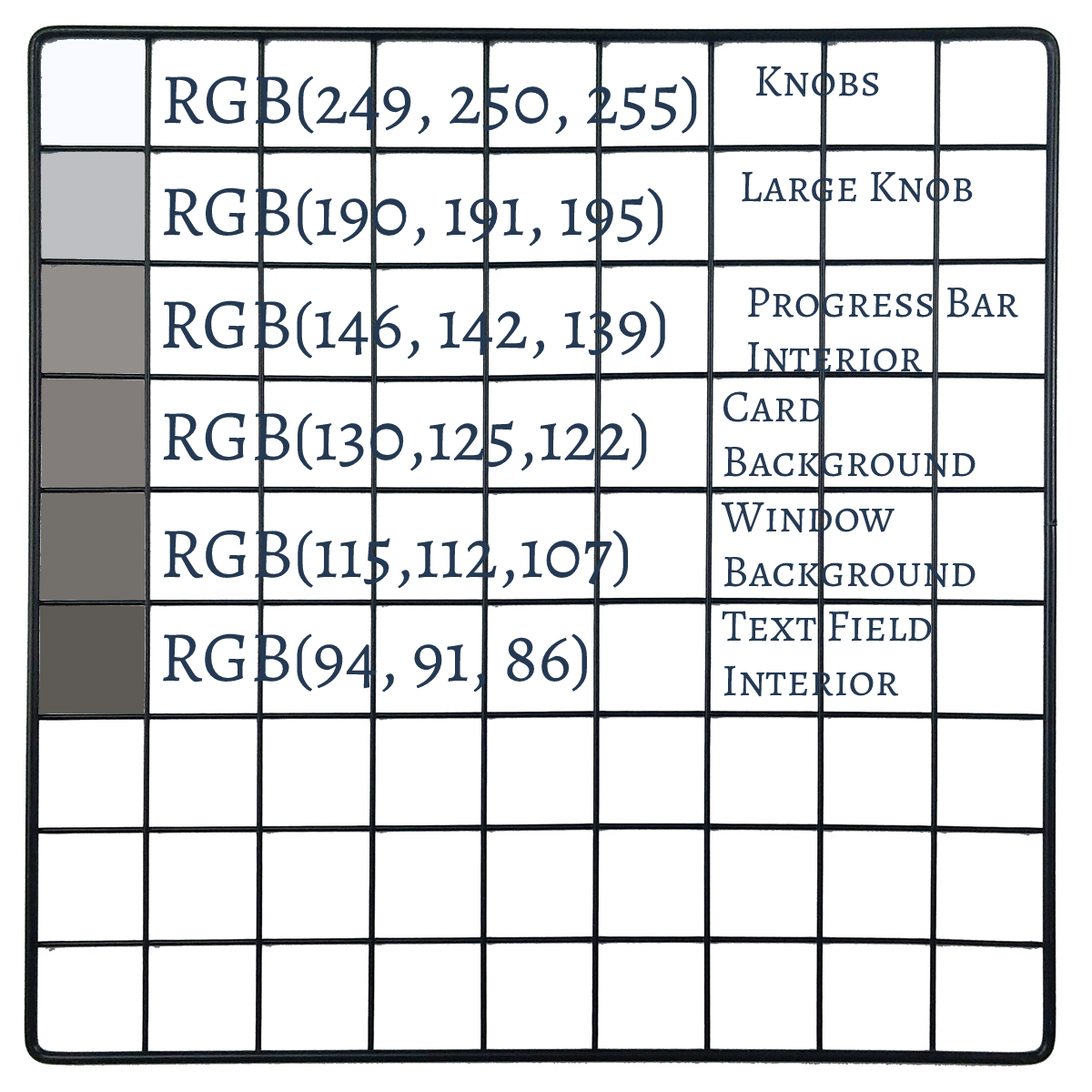
<style>
.page{position:relative;width:1092px;height:1092px;background:#ffffff}
.page>*{position:absolute;margin:0}
.t1{font:45.5px "AlegreyaSC-Regular";color:#253952}
.t2{font:71.9px "AlegreyaSC-Regular";color:#253952}
</style>
<div class="page">
<p class="t1" style="left:755px;top:66px;width:124px;height:31px">Knobs</p>
<p class="t2" style="left:164px;top:76px;width:533px;height:59px">RGB(249, 250, 255)</p>
<p class="t1" style="left:742px;top:171px;width:231px;height:32px">Large Knob</p>
<p class="t2" style="left:163px;top:187px;width:500px;height:60px">RGB(190, 191, 195)</p>
<p class="t1" style="left:747px;top:287px;width:271px;height:86px">Progress Bar<br>Interior</p>
<p class="t2" style="left:163px;top:300px;width:502px;height:59px">RGB(146, 142, 139)</p>
<p class="t1" style="left:723px;top:391px;width:253px;height:87px">Card <br>Background</p>
<p class="t2" style="left:163px;top:412px;width:484px;height:59px">RGB(130,125,122)</p>
<p class="t1" style="left:721px;top:501px;width:255px;height:87px">Window <br>Background</p>
<p class="t2" style="left:163px;top:530px;width:466px;height:59px">RGB(115,112,107)</p>
<p class="t1" style="left:722px;top:611px;width:210px;height:86px">Text Field <br>Interior</p>
<p class="t2" style="left:163px;top:633px;width:424px;height:60px">RGB(94, 91, 86)</p>
</div>
